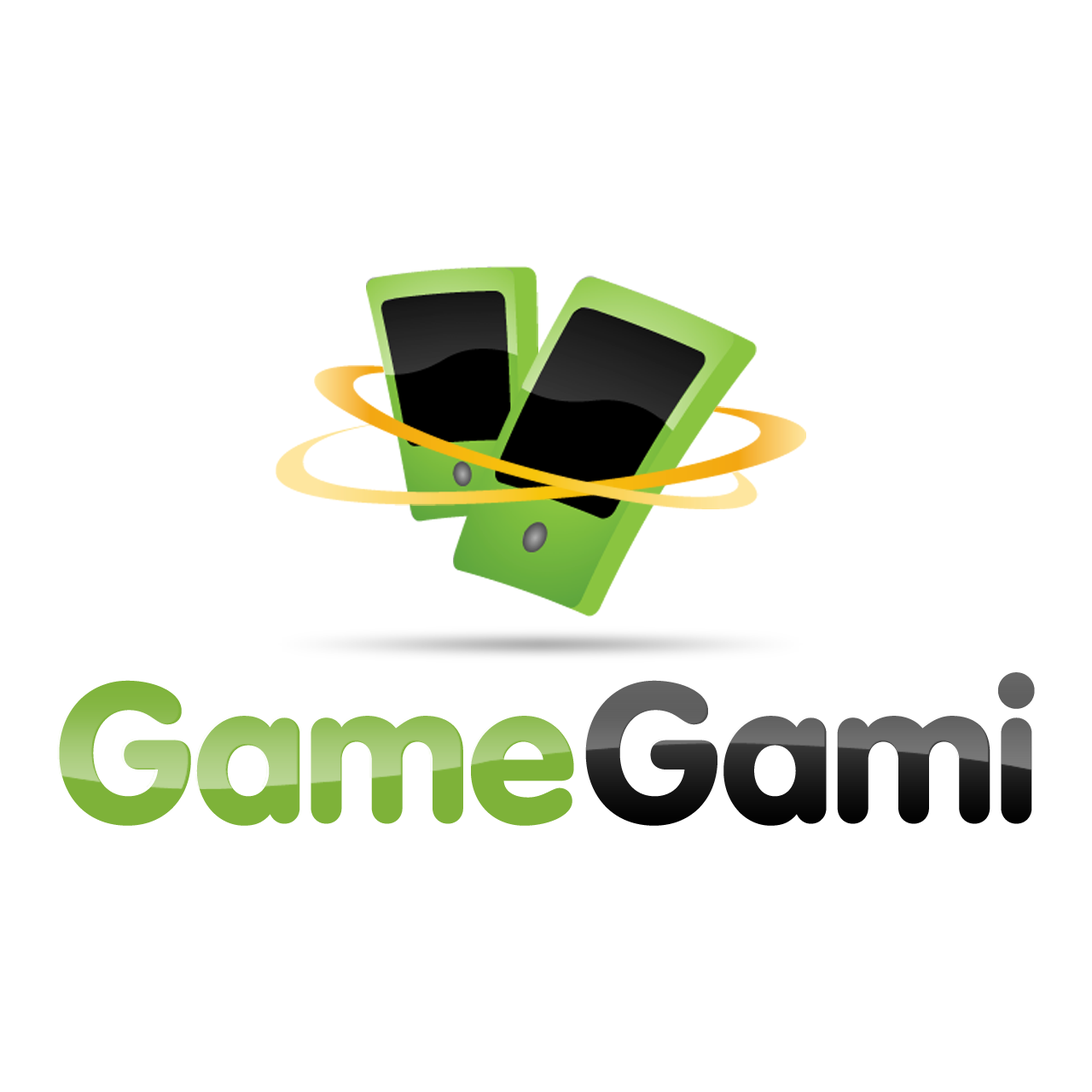
<style>
.page{position:relative;width:1092px;height:1092px;background:#ffffff}
.page>*{position:absolute;margin:0}
.t1{font:195px "VAGRounded-Black";letter-spacing:-0.01em}
</style>
<div class="page">
<p class="t1" style="left:585px;top:672px;width:450px;height:154px">Gami</p>
<p class="t1" style="left:59px;top:680px;width:515px;height:146px">Game</p>
</div>
